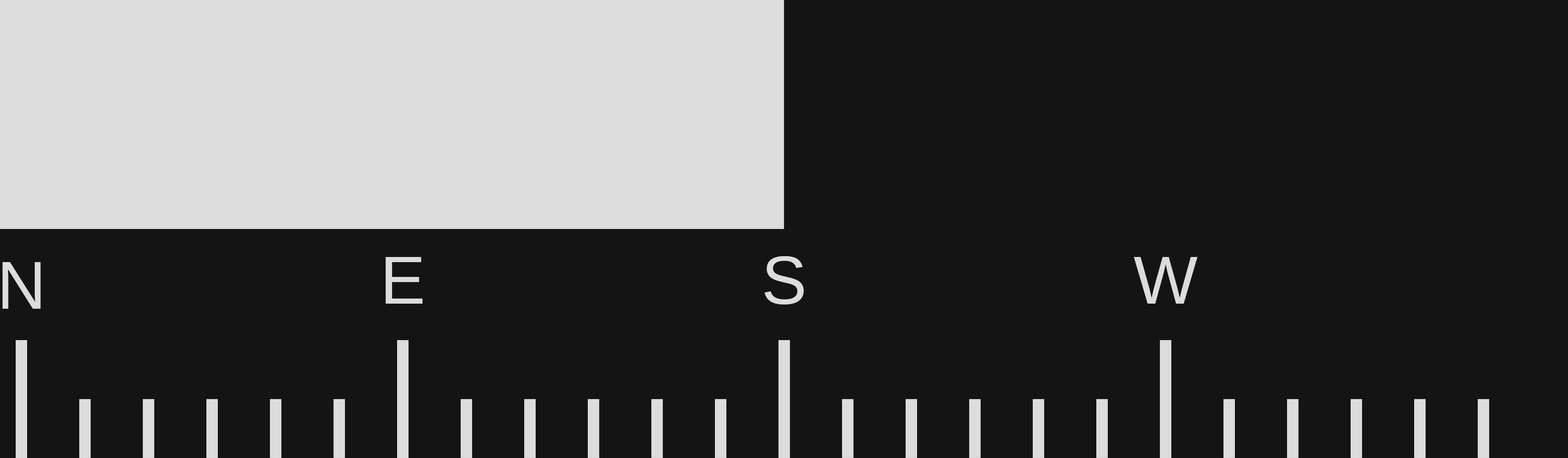
<style>
.page{position:relative;width:1568px;height:458px;background:#141414}
.page>*{position:absolute;margin:0}
.t1{font:67.8px "LiberationSans";color:#dcdcdc}
</style>
<div class="page">
<p class="t1" style="left:386px;top:257px;width:37px;height:46px">E</p>
<p class="t1" style="left:765px;top:256px;width:39px;height:48px">S</p>
<p class="t1" style="left:1134px;top:257px;width:64px;height:46px">W</p>
<p class="t1" style="left:3px;top:262px;width:38px;height:47px">N</p>
</div>
